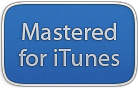
<style>
.page{position:relative;width:138px;height:88px}
.page>*{position:absolute;margin:0}
.t1{font:24px/26px "MyriadPro-Regular";letter-spacing:0.02em;color:#c6d3e4}
</style>
<div class="page">
<p class="t1" style="left:19px;top:23px;width:101px;height:43px;text-align:center">Mastered<br>for iTunes</p>
</div>
